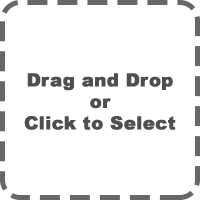
<style>
.page{position:relative;width:200px;height:200px;background:#ffffff}
.page>*{position:absolute;margin:0}
.t1{font:18px "Arial-Black";color:#4f4f4f;font-weight:bold}
</style>
<div class="page">
<p class="t1" style="left:24px;top:73px;width:152px;height:57px;text-align:center">Drag and Drop<br>or <br>Click to Select</p>
</div>
